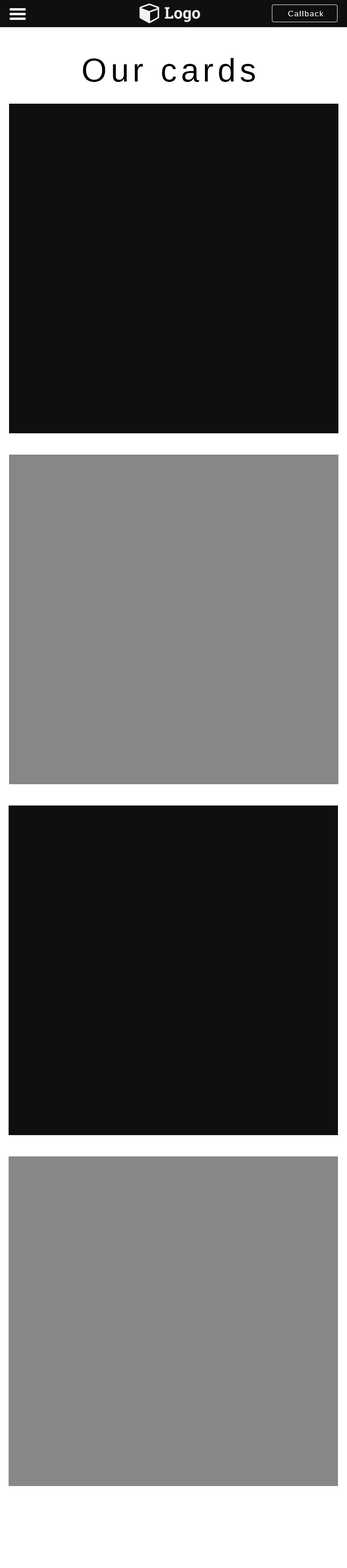
<style>
.page{position:relative;width:347px;height:1568px;background:#0f0f0f}
.page>*{position:absolute;margin:0}
.t1{font:7.5px "WineArial";letter-spacing:0.12em;color:#ffffff}
.t2{font:32.7px "WineArial";letter-spacing:0.12em;color:#000000}
</style>
<div class="page">
<p class="t1" style="left:288px;top:11px;width:36px;height:5px">Callback</p>
<p class="t2" style="left:83px;top:58px;width:172px;height:24px">Our cards</p>
</div>
